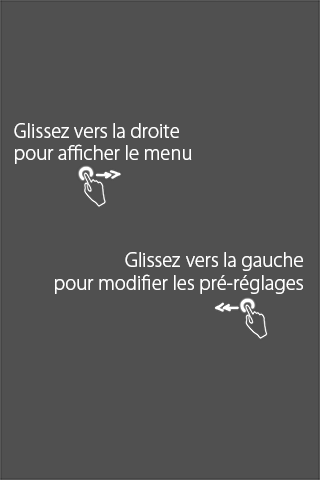
<style>
.page{position:relative;width:320px;height:480px;background:#505050}
.page>*{position:absolute;margin:0}
.t1{font:18.7px "KozGoPr6N-Light";color:#ffffff}
</style>
<div class="page">
<p class="t1" style="left:14px;top:123px;width:178px;height:41px">Glissez vers la droite<br>pour afficher le menu</p>
<p class="t1" style="left:55px;top:252px;width:248px;height:42px;text-align:right">Glissez vers la gauche<br> pour modifier les pré-réglages</p>
</div>
